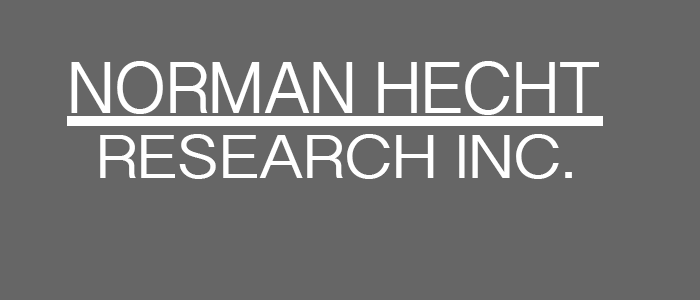
<style>
.page{position:relative;width:700px;height:300px;background:#666666}
.page>*{position:absolute;margin:0}
.t1{font:73.2px "TamilSangamMN";color:#ffffff}
.t2{font:61.6px "TamilSangamMN";color:#ffffff;scale:1.14 1}
</style>
<div class="page">
<p class="t1" style="left:71px;top:61px;width:528px;height:54px">NORMAN HECHT</p>
<p class="t2" style="left:100px;top:134px;width:472px;height:45px">RESEARCH INC.</p>
</div>
